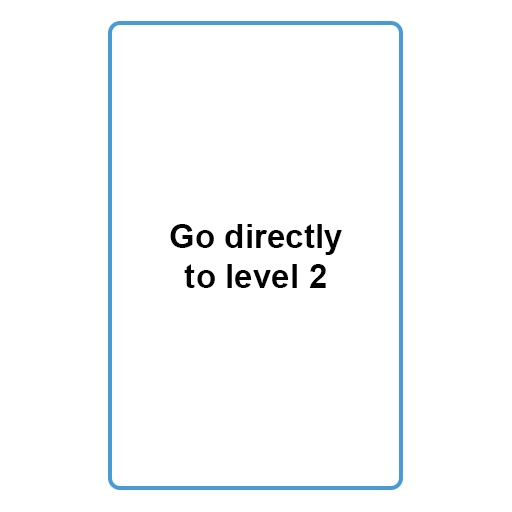
<style>
.page{position:relative;width:512px;height:512px;background:#ffffff}
.page>*{position:absolute;margin:0}
.t1{font:33.3px "Arial-BoldMT";color:#000000}
</style>
<div class="page">
<p class="t1" style="left:170px;top:224px;width:172px;height:64px;text-align:center">Go directly<br>to level 2</p>
</div>
